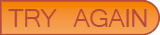
<style>
.page{position:relative;width:160px;height:35px}
.page>*{position:absolute;margin:0}
.t1{font:40.6px "Kartika";letter-spacing:-0.025em;color:#b64b3c}
</style>
<div class="page">
<p class="t1" style="left:8px;top:9px;width:139px;height:18px">TRY AGAIN</p>
</div>
